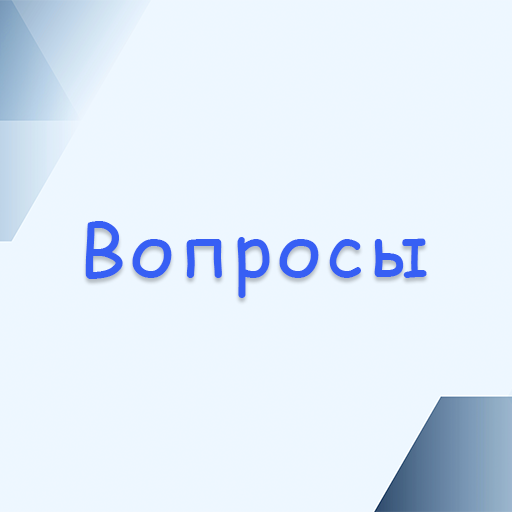
<style>
.page{position:relative;width:512px;height:512px;background:#edf7ff}
.page>*{position:absolute;margin:0}
.t1{font:73.6px "ComicSansMS";letter-spacing:0.075em;color:#375ff4}
</style>
<div class="page">
<p class="t1" style="left:85px;top:221px;width:342px;height:77px">Вопросы</p>
</div>
